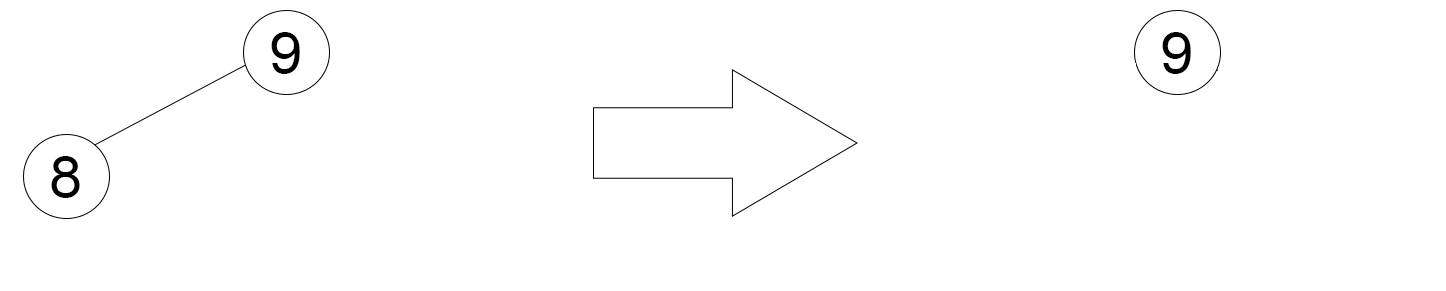
<style>
.page{position:relative;width:1446px;height:291px;background:#ffffff}
.page>*{position:absolute;margin:0}
.t1{font:60px "ArialMT";color:#000000}
</style>
<div class="page">
<p class="t1" style="left:271px;top:32px;width:29px;height:42px">9</p>
<p class="t1" style="left:51px;top:156px;width:29px;height:42px">8</p>
</div>
